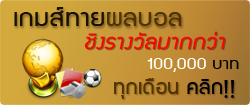
<style>
.page{position:relative;width:250px;height:105px}
.page>*{position:absolute;margin:0}
.t1{font:27px "supermarket";letter-spacing:0.01em;color:#191000;scale:1.11 1}
.t2{font:27px "supermarket";letter-spacing:0.01em;color:#523300;scale:1.11 1}
.t3{font:23.4px "supermarket";letter-spacing:0.01em;color:#fb0303;font-style:italic;scale:1.11 1}
.t4{font:18px "supermarket";letter-spacing:0.01em;color:#ffffff;scale:1.11 1}
.t5{font:18px "supermarket";letter-spacing:0.01em;color:#020202;scale:1.11 1}
.t6{font:21.6px "supermarket";letter-spacing:0.01em;color:#523300;scale:1.11 1}
.t7{font:21.6px "supermarket";letter-spacing:0.01em;color:#020202;scale:1.11 1}
</style>
<div class="page">
<p class="t1" style="left:14px;top:7px;width:168px;height:19px">เกมส์ทาย<span class="t2">ผลบอล</span></p>
<p class="t3" style="left:85px;top:31px;width:140px;height:19px">ชิงรางวัลมากกว่า</p>
<p class="t4" style="left:147px;top:58px;width:92px;height:14px">100,000<span class="t5"> บาท</span></p>
<p class="t6" style="left:114px;top:78px;width:120px;height:21px">ทุกเดือน <span class="t7">คลิก!!</span></p>
</div>
